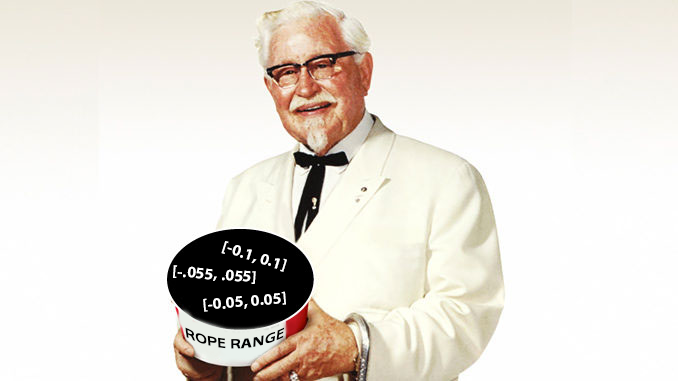
<style>
.page{position:relative;width:678px;height:381px;background:#fefefe}
.page>*{position:absolute;margin:0}
.t1{font:16px "MyriadPro-Bold";color:#ffffff}
.t2{font:16px "MyriadPro-Bold";color:#000000}
</style>
<div class="page">
<p class="t1" style="left:221px;top:241px;width:66px;height:31px;rotate:17deg">[-0.1, 0.1]</p>
<p class="t1" style="left:173px;top:265px;width:83px;height:19px;rotate:4deg">[-.055, .055]</p>
<p class="t1" style="left:203px;top:291px;width:83px;height:21px;rotate:-5deg">[-0.05, 0.05]</p>
<p class="t2" style="left:185px;top:327px;width:100px;height:22px">ROPE RANGE</p>
</div>
